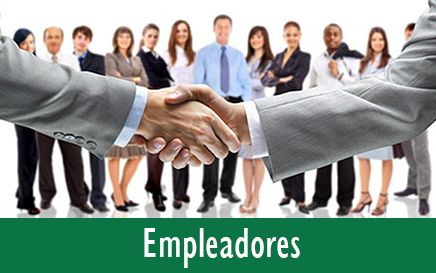
<style>
.page{position:relative;width:436px;height:273px}
.page>*{position:absolute;margin:0}
.t1{font:44px "GillSansMT-Condensed";letter-spacing:0.005em;color:#ffffff}
</style>
<div class="page">
<p class="t1" style="left:144px;top:228px;width:156px;height:40px">Empleadores</p>
</div>
